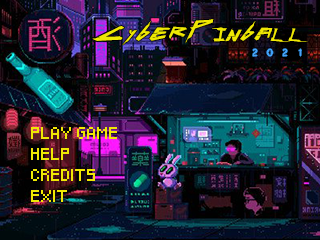
<style>
.page{position:relative;width:320px;height:240px}
.page>*{position:absolute;margin:0}
.t1{font:30px "Cyberpunk-Regular";letter-spacing:-0.16em;color:#efe804}
.t2{font:12px "Microsoft-Yi-Baiti";letter-spacing:0.74em;color:#62aaf4}
.t3{font:10px "Pixeled";color:#efe804}
</style>
<div class="page">
<p class="t1" style="left:92px;top:19px;width:216px;height:26px">CyberPinball</p>
<p class="t2" style="left:253px;top:49px;width:48px;height:7px">2021</p>
<p class="t3" style="left:31px;top:127px;width:86px;height:12px">PLAY GAME</p>
<p class="t3" style="left:31px;top:148px;width:38px;height:12px">HELP</p>
<p class="t3" style="left:31px;top:169px;width:64px;height:12px">CREDITS</p>
<p class="t3" style="left:31px;top:190px;width:36px;height:12px">EXIT</p>
</div>
